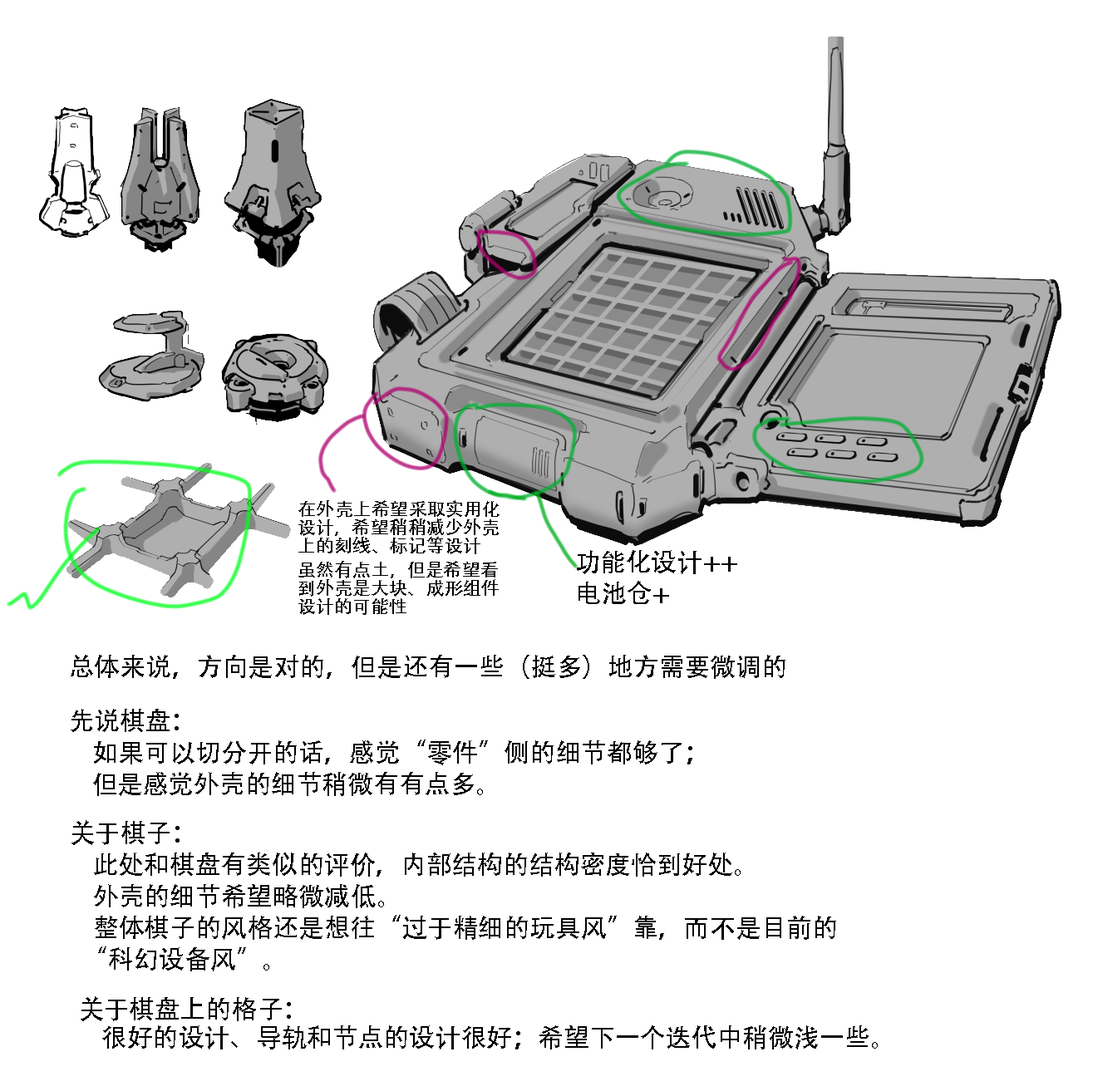
<style>
.page{position:relative;width:1093px;height:1091px;background:#ffffff}
.page>*{position:absolute;margin:0}
.t1{font:18.3px/18.3px "AdobeHeitiStd-Regular";color:#000000}
.t2{font:25.8px/49px "AdobeHeitiStd-Regular";color:#000000}
.t3{font:25.8px "AdobeHeitiStd-Regular";color:#000000}
.t4{font:25.8px/45.7px "AdobeHeitiStd-Regular";color:#000000}
</style>
<div class="page">
<p class="t1" style="left:298px;top:500px;width:201px;height:115px">在外壳上希望采取实用化设计，希望稍稍减少外壳上的刻线、标记等设计<br>虽然有点土，但是希望看到外壳是大块、成形组件设计的可能性</p>
<p class="t2" style="left:577px;top:550px;width:160px;height:54px">功能化设计++<br>电池仓+</p>
<p class="t3" style="left:71px;top:655px;width:714px;height:24px">总体来说，方向是对的，但是还有一些（挺多）地方需要微调的。</p>
<p class="t2" style="left:71px;top:709px;width:621px;height:87px">先说棋盘：<br>    如果可以切分开的话，感觉“零件”侧的细节都够了；<br>    但是感觉外壳的细节稍微有有点多。</p>
<p class="t2" style="left:71px;top:820px;width:765px;height:151px">关于棋子：<br>    此处和棋盘有类似的评价，内部结构的结构密度恰到好处。<br>    外壳的细节希望略微减低。<br>    整体棋子的风格还是想往“过于精细的玩具风”靠，而不是目前的<br>  “科幻设备风”。</p>
<p class="t4" style="left:81px;top:996px;width:797px;height:54px">关于棋盘上的格子：<br>    很好的设计、导轨和节点的设计很好；希望下一个迭代中稍微浅一些。</p>
</div>
